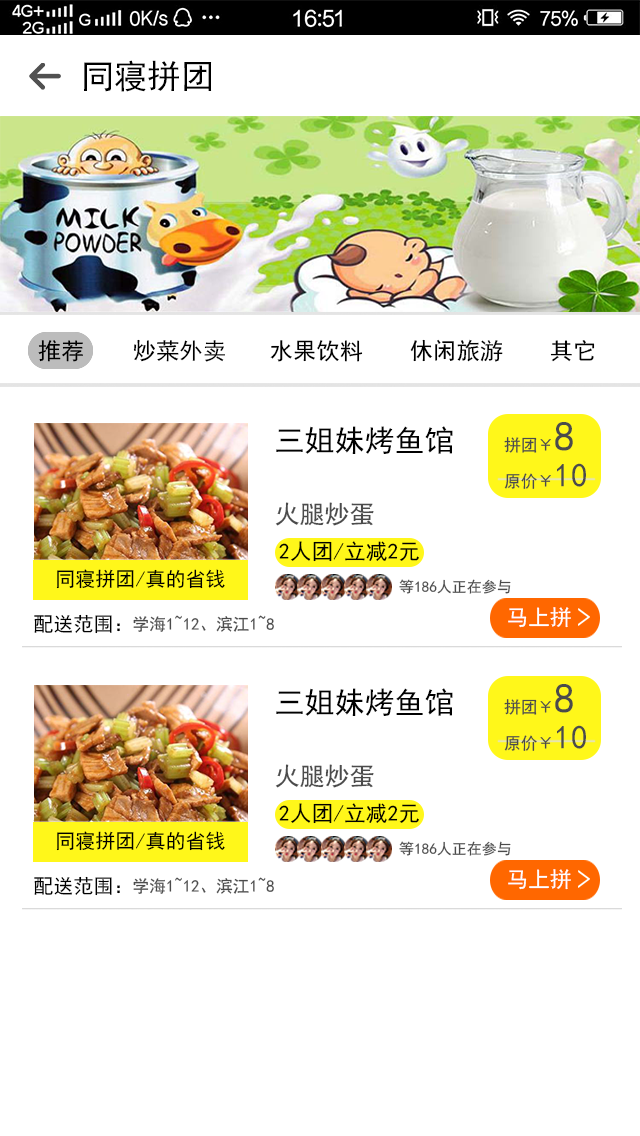
<style>
.page{position:relative;width:640px;height:1136px;background:#ffffff}
.page>*{position:absolute;margin:0}
.t1{font:33.3px "SimHei";letter-spacing:0.002em;color:#000000}
.t2{font:23.3px "SimHei";letter-spacing:0.002em;color:#000000}
.t3{font:16.7px/43.1px "SimHei";letter-spacing:0.002em;color:#4b4b4b}
.t4{font:41.7px/43.1px "SimHei";letter-spacing:0.002em;color:#4b4b4b}
.t5{font:33.3px/43.1px "SimHei";letter-spacing:0.002em;color:#4b4b4b}
.t6{font:30px "SimHei";letter-spacing:0.002em;color:#010101}
.t7{font:25px "SimHei";letter-spacing:0.002em;color:#4b4b4b}
.t8{font:21.7px "SimHei";letter-spacing:0.002em;color:#000000}
.t9{font:20px "SimHei";letter-spacing:0.002em;color:#000000}
.t10{font:15px "SimHei";letter-spacing:0.002em;color:#4b4b4b}
.t11{font:20px "SimHei";letter-spacing:0.002em;color:#010101}
.t12{font:16.7px "SimHei";letter-spacing:0.002em;color:#4b4b4b}
.t13{font:21.7px "SimHei";letter-spacing:0.002em;color:#ffffff}
.t14{font:21.7px "SimHei";letter-spacing:0.002em;color:#fefefe}
</style>
<div class="page">
<p class="t1" style="left:84px;top:60px;width:128px;height:32px">同寝拼团</p>
<p class="t2" style="left:38px;top:340px;width:45px;height:22px">推荐</p>
<p class="t2" style="left:133px;top:339px;width:92px;height:23px">炒菜外卖</p>
<p class="t2" style="left:270px;top:340px;width:93px;height:22px">水果饮料</p>
<p class="t2" style="left:410px;top:339px;width:93px;height:23px">休闲旅游</p>
<p class="t2" style="left:550px;top:340px;width:45px;height:22px">其它</p>
<p class="t3" style="left:504px;top:422px;width:82px;height:67px">拼团￥<span class="t4">8<br></span>原价￥<span class="t5">10</span></p>
<p class="t6" style="left:276px;top:426px;width:177px;height:28px">三姐妹烤鱼馆</p>
<p class="t7" style="left:275px;top:502px;width:99px;height:24px">火腿炒蛋</p>
<p class="t8" style="left:279px;top:541px;width:140px;height:21px">2人团/立减2元</p>
<p class="t9" style="left:56px;top:569px;width:169px;height:20px">同寝拼团/真的省钱</p>
<p class="t10" style="left:399px;top:579px;width:112px;height:15px">等186人正在参与</p>
<p class="t11" style="left:34px;top:614px;width:86px;height:20px">配送范围：</p>
<p class="t12" style="left:133px;top:615px;width:141px;height:17px">学海1~12、滨江1~8</p>
<p class="t13" style="left:508px;top:607px;width:63px;height:21px">马上拼</p>
<p class="t6" style="left:276px;top:688px;width:177px;height:28px">三姐妹烤鱼馆</p>
<p class="t3" style="left:504px;top:684px;width:82px;height:67px">拼团￥<span class="t4">8<br></span>原价￥<span class="t5">10</span></p>
<p class="t7" style="left:275px;top:764px;width:99px;height:24px">火腿炒蛋</p>
<p class="t8" style="left:279px;top:803px;width:140px;height:21px">2人团/立减2元</p>
<p class="t9" style="left:56px;top:831px;width:169px;height:20px">同寝拼团/真的省钱</p>
<p class="t10" style="left:399px;top:841px;width:112px;height:15px">等186人正在参与</p>
<p class="t14" style="left:508px;top:869px;width:63px;height:21px">马上拼</p>
<p class="t11" style="left:34px;top:876px;width:86px;height:20px">配送范围：</p>
<p class="t12" style="left:133px;top:877px;width:141px;height:17px">学海1~12、滨江1~8</p>
</div>
